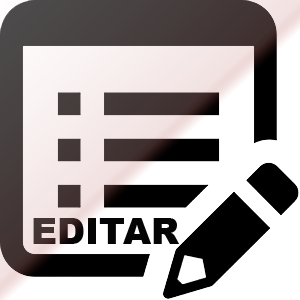
<style>
.page{position:relative;width:300px;height:300px;background:#ffffff}
.page>*{position:absolute;margin:0}
.t1{font:36px "Arial-Black";color:#040404}
</style>
<div class="page">
<p class="t1" style="left:33px;top:218px;width:146px;height:26px">EDITAR</p>
</div>
